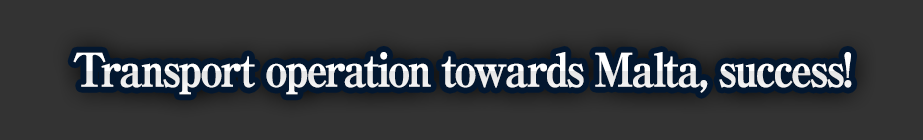
<style>
.page{position:relative;width:923px;height:140px;background:#333333}
.page>*{position:absolute;margin:0}
.t1{font:46px "RyuminPro-ExBold";letter-spacing:-0.08em;color:#ffffff;font-weight:bold;scale:0.9 1}
</style>
<div class="page">
<p class="t1" style="left:73px;top:52px;width:779px;height:43px">Transport operation towards Malta, success!</p>
</div>
